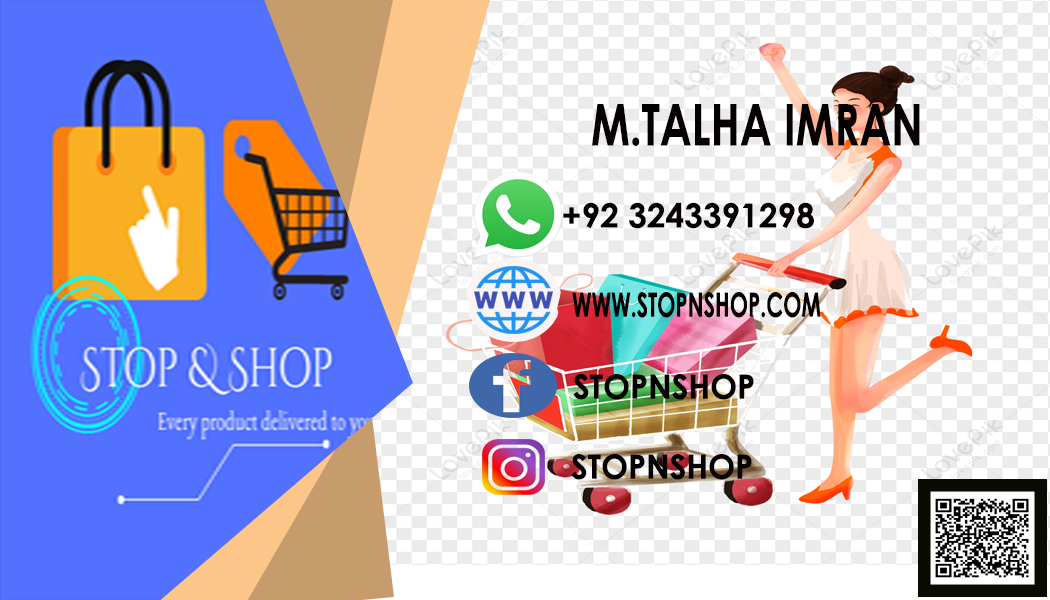
<style>
.page{position:relative;width:1050px;height:600px;background:#ffffff}
.page>*{position:absolute;margin:0}
.t1{font:57.5px "CenturyGothic-Bold";color:#060101;scale:0.75 1}
.t2{font:33.3px "CenturyGothic-Bold";color:#060101}
.t3{font:33.5px "CenturyGothic-Bold";color:#060101;scale:0.65 1}
.t4{font:33.5px "CenturyGothic-Bold";color:#060101;scale:0.96 1}
</style>
<div class="page">
<p class="t1" style="left:592px;top:104px;width:328px;height:43px">M.TALHA IMRAN</p>
<p class="t2" style="left:563px;top:202px;width:251px;height:27px">+92 3243391298</p>
<p class="t3" style="left:572px;top:292px;width:249px;height:26px">WWW.STOPNSHOP.COM</p>
<p class="t4" style="left:573px;top:374px;width:181px;height:26px">STOPNSHOP</p>
<p class="t4" style="left:571px;top:454px;width:181px;height:26px">STOPNSHOP</p>
</div>
